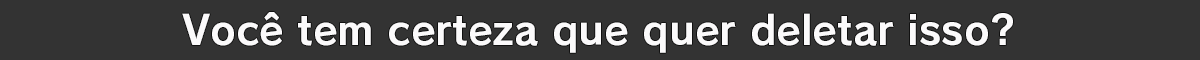
<style>
.page{position:relative;width:1200px;height:60px;background:#333333}
.page>*{position:absolute;margin:0}
.t1{font:40px "RodinPro-B";color:#fbfafb}
</style>
<div class="page">
<p class="t1" style="left:182px;top:12px;width:831px;height:41px">Você tem certeza que quer deletar isso?</p>
</div>
